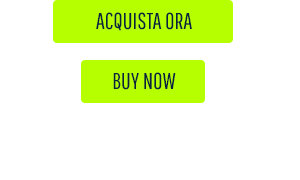
<style>
.page{position:relative;width:300px;height:180px;background:#ffffff}
.page>*{position:absolute;margin:0}
.t1{font:23px "PathwayGothicOne-Book";color:#092439;text-transform:uppercase}
</style>
<div class="page">
<p class="t1" style="left:96px;top:12px;width:96px;height:19px">Acquista ora</p>
<p class="t1" style="left:113px;top:72px;width:63px;height:18px">BUY now</p>
</div>
